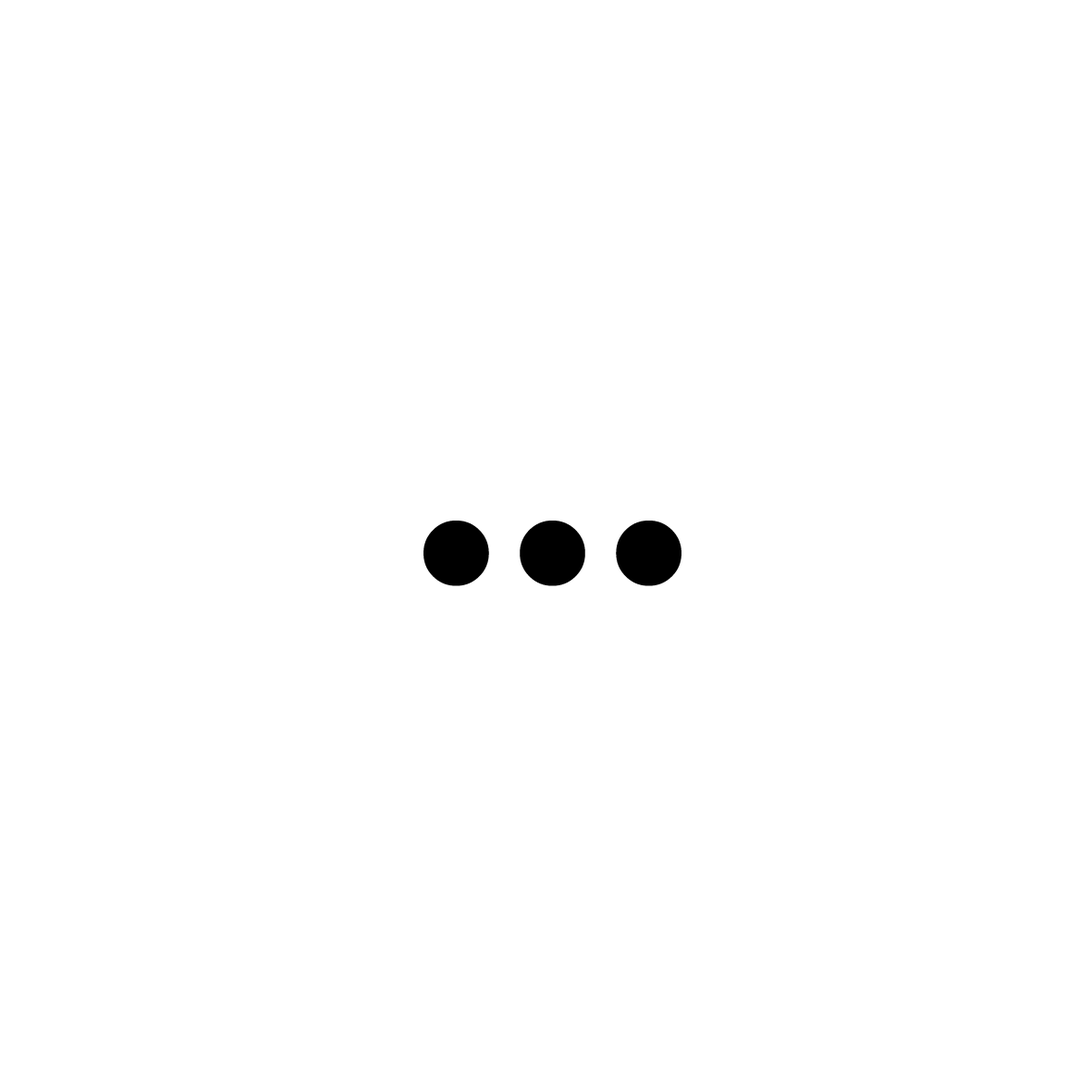
<style>
.page{position:relative;width:1092px;height:1092px;background:#ffffff}
.page>*{position:absolute;margin:0}
.t1{font:385.3px "Times-Bold";color:#000000}
</style>
<div class="page">
<p class="t1" style="left:423px;top:521px;width:258px;height:65px">...</p>
</div>
